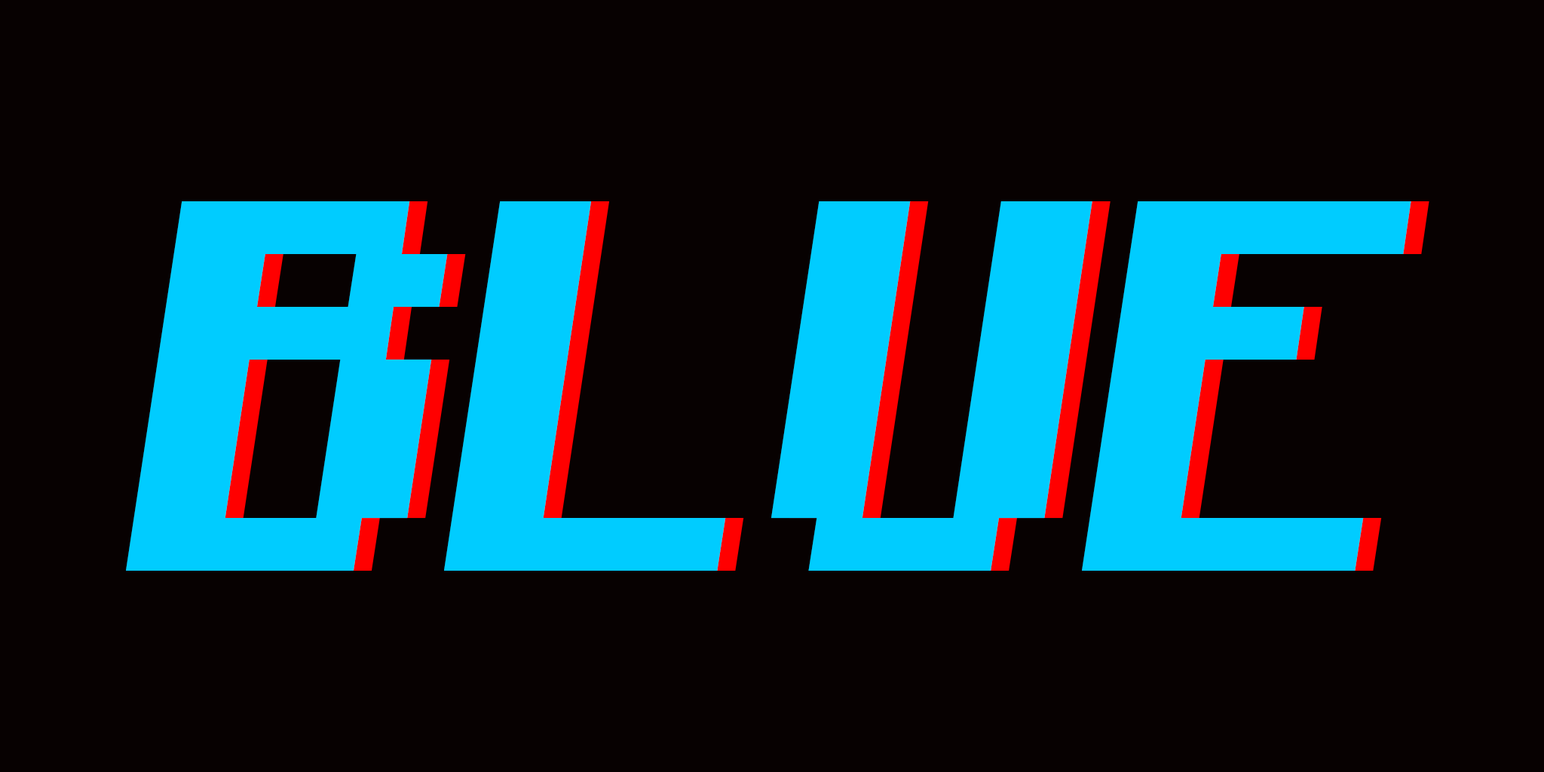
<style>
.page{position:relative;width:1544px;height:772px;background:#070101}
.page>*{position:absolute;margin:0}
.t1{font:527.8px "Minecraft-BoldItalic";color:#00ccff;scale:0.86 1}
</style>
<div class="page">
<p class="t1" style="left:126px;top:201px;width:1286px;height:370px">BLUE</p>
</div>
